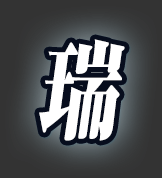
<style>
.page{position:relative;width:162px;height:178px;background:#333333}
.page>*{position:absolute;margin:0}
.t1{font:106.8px "RyuminPro-ExHeavy";letter-spacing:-0.08em;color:#ffffff;font-style:italic;scale:0.78 1}
</style>
<div class="page">
<p class="t1" style="left:39px;top:39px;width:86px;height:102px">瑞</p>
</div>
